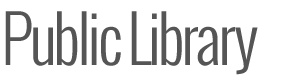
<style>
.page{position:relative;width:290px;height:80px;background:#ffffff}
.page>*{position:absolute;margin:0}
.t1{font:64px "Oswald-Light";letter-spacing:-0.05em;color:#555555}
</style>
<div class="page">
<p class="t1" style="left:5px;top:11px;width:253px;height:64px">Public Library</p>
</div>
